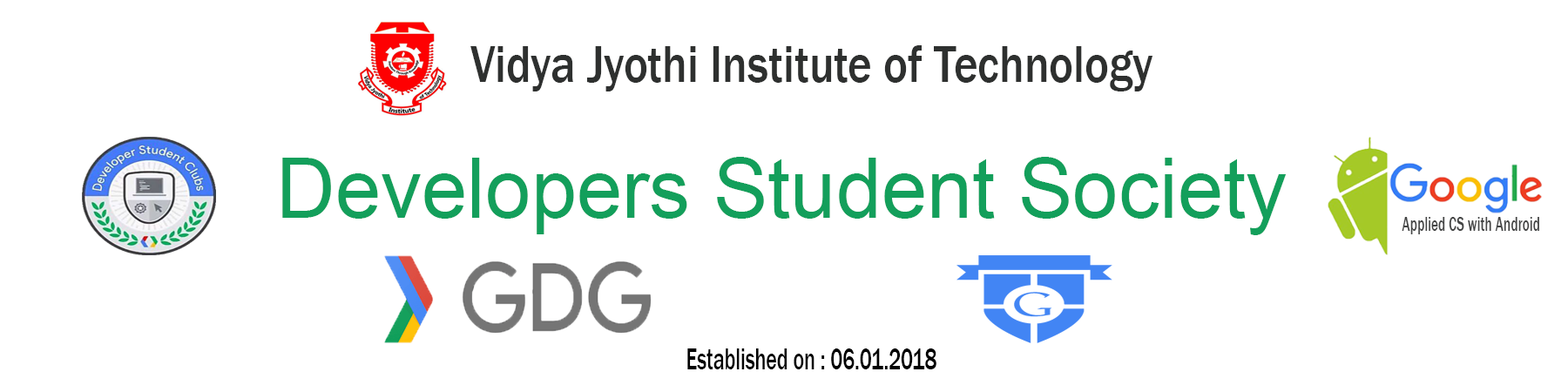
<style>
.page{position:relative;width:1568px;height:392px;background:#ffffff}
.page>*{position:absolute;margin:0}
.t1{font:53.5px "FranklinGothic-Medium";color:#2e302f;scale:0.86 1}
.t2{font:83.3px "ArialMT";color:#139f5b}
.t3{font:19.9px "FranklinGothic-Medium";color:#444545;scale:0.68 1}
.t4{font:31.3px "FranklinGothic-Medium";color:#000000;scale:0.66 1}
</style>
<div class="page">
<p class="t1" style="left:470px;top:45px;width:683px;height:46px">Vidya Jyothi Institute of Technology</p>
<p class="t2" style="left:282px;top:157px;width:1005px;height:78px">Developers Student Society</p>
<p class="t3" style="left:1402px;top:217px;width:137px;height:17px">Applied CS with Android</p>
<p class="t4" style="left:687px;top:348px;width:249px;height:21px">Established on : 06.01.2018</p>
</div>
